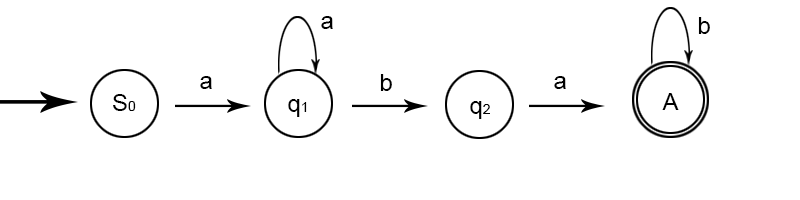
<style>
.page{position:relative;width:800px;height:200px;background:#ffffff}
.page>*{position:absolute;margin:0}
.t1{font:24px "ArialMT";color:#000000}
.t2{font:14px "ArialMT";color:#000000}
</style>
<div class="page">
<p class="t1" style="left:321px;top:16px;width:12px;height:13px">a</p>
<p class="t1" style="left:698px;top:17px;width:12px;height:17px">b</p>
<p class="t1" style="left:200px;top:76px;width:12px;height:13px">a</p>
<p class="t1" style="left:380px;top:74px;width:12px;height:17px">b</p>
<p class="t1" style="left:554px;top:76px;width:12px;height:13px">a</p>
<p class="t1" style="left:113px;top:94px;width:23px;height:17px">S<span class="t2">0</span></p>
<p class="t1" style="left:288px;top:99px;width:19px;height:18px">q<span class="t2">1</span></p>
<p class="t1" style="left:470px;top:101px;width:20px;height:18px">q<span class="t2">2</span></p>
<p class="t1" style="left:662px;top:93px;width:17px;height:17px">A</p>
</div>
